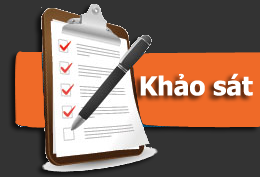
<style>
.page{position:relative;width:260px;height:177px;background:#333333}
.page>*{position:absolute;margin:0}
.t1{font:26px "Tahoma-Bold";color:#ffffff}
</style>
<div class="page">
<p class="t1" style="left:140px;top:73px;width:113px;height:23px">Khảo sát</p>
</div>
